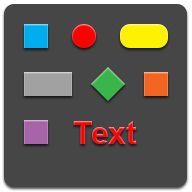
<style>
.page{position:relative;width:192px;height:192px;background:#464646}
.page>*{position:absolute;margin:0}
.t1{font:32px "Arial-BoldMT";color:#ff0000}
</style>
<div class="page">
<p class="t1" style="left:73px;top:121px;width:64px;height:23px">Text</p>
</div>
